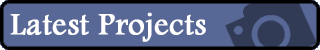
<style>
.page{position:relative;width:320px;height:50px;background:#576796}
.page>*{position:absolute;margin:0}
.t1{font:32px "FootlightMTLight";color:#ffffff;font-weight:bold}
</style>
<div class="page">
<p class="t1" style="left:10px;top:12px;width:196px;height:30px">Latest Projects</p>
</div>
